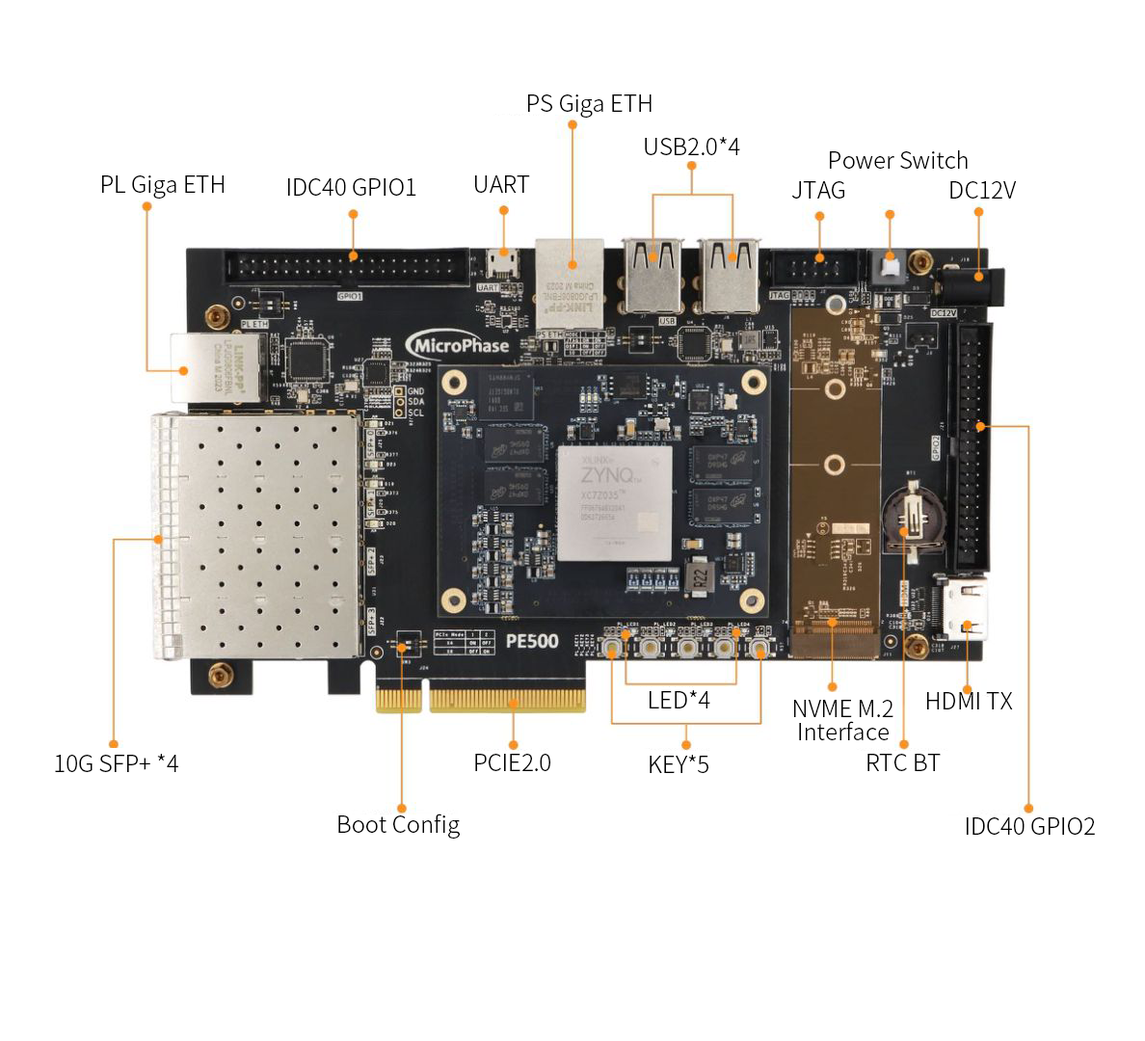
<style>
.page{position:relative;width:1145px;height:1041px;background:#ffffff}
.page>*{position:absolute;margin:0}
.t1{font:23.1px "SourceHanSansCN-Light";color:#000000}
.t2{font:23.1px/23.1px "SourceHanSansCN-Light";color:#000000}
</style>
<div class="page">
<p class="t1" style="left:528px;top:94px;width:124px;height:24px">PS Giga ETH</p>
<p class="t1" style="left:645px;top:137px;width:95px;height:18px">USB2.0*4</p>
<p class="t1" style="left:830px;top:150px;width:138px;height:19px">Power Switch</p>
<p class="t1" style="left:102px;top:175px;width:122px;height:24px">PL Giga ETH</p>
<p class="t1" style="left:288px;top:178px;width:128px;height:18px">IDC40 GPIO1</p>
<p class="t1" style="left:475px;top:175px;width:55px;height:18px">UART</p>
<p class="t1" style="left:791px;top:181px;width:54px;height:18px">JTAG</p>
<p class="t1" style="left:951px;top:181px;width:66px;height:18px">DC12V</p>
<p class="t1" style="left:650px;top:690px;width:61px;height:19px">LED*4</p>
<p class="t2" style="left:794px;top:700px;width:100px;height:40px">NVME M.2<br> Interface</p>
<p class="t1" style="left:927px;top:692px;width:86px;height:18px">HDMI TX</p>
<p class="t1" style="left:55px;top:754px;width:123px;height:18px">10G SFP+ *4</p>
<p class="t1" style="left:475px;top:754px;width:75px;height:17px">PCIE2.0</p>
<p class="t1" style="left:650px;top:755px;width:59px;height:18px">KEY*5</p>
<p class="t1" style="left:868px;top:754px;width:73px;height:17px">RTC BT</p>
<p class="t1" style="left:338px;top:814px;width:122px;height:25px">Boot Config</p>
<p class="t1" style="left:967px;top:818px;width:128px;height:17px">IDC40 GPIO2</p>
</div>
